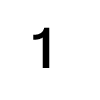
<style>
.page{position:relative;width:100px;height:100px;background:#ffffff}
.page>*{position:absolute;margin:0}
.t1{font:60px "Shruti-Bold";color:#000000}
</style>
<div class="page">
<p class="t1" style="left:33px;top:27px;width:17px;height:41px">1</p>
</div>
